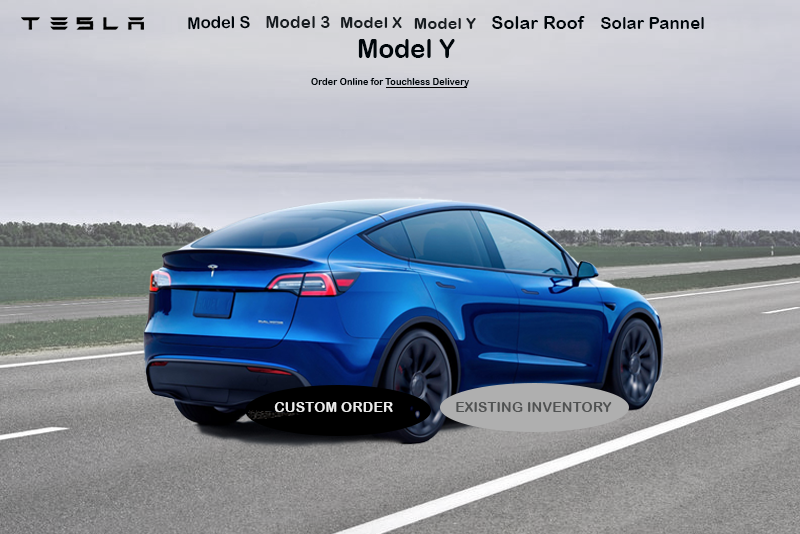
<style>
.page{position:relative;width:800px;height:534px}
.page>*{position:absolute;margin:0}
.t1{font:16.5px "ArialRoundedMTBold";color:#00060b}
.t2{font:17.3px "ArialRoundedMTBold";color:#181d21}
.t3{font:16.5px "ArialRoundedMTBold";color:#181d21}
.t4{font:18.3px "ArialRoundedMTBold";color:#00060b}
.t5{font:17.1px "ArialRoundedMTBold";color:#00060b}
.t6{font:25.9px "ArialRoundedMTBold";color:#00060b}
.t7{font:9.2px "ArialRoundedMTBold";color:#00060b}
.t8{font:14.4px "ArialRoundedMTBold";color:#ebebeb}
.t9{font:14.4px "ArialRoundedMTBold";color:#505252}
</style>
<div class="page">
<p class="t1" style="left:188px;top:16px;width:62px;height:14px;rotate:-1deg">Model S</p>
<p class="t2" style="left:266px;top:16px;width:64px;height:12px">Model 3</p>
<p class="t3" style="left:341px;top:17px;width:61px;height:11px">Model X</p>
<p class="t4" style="left:492px;top:16px;width:93px;height:13px">Solar Roof</p>
<p class="t5" style="left:601px;top:17px;width:103px;height:12px">Solar Pannel</p>
<p class="t3" style="left:414px;top:18px;width:62px;height:11px">Model Y</p>
<p class="t6" style="left:358px;top:39px;width:97px;height:19px">Model Y</p>
<p class="t7" style="left:311px;top:78px;width:73px;height:7px">Order Online for</p>
<p class="t7" style="left:385px;top:78px;width:84px;height:9px">Touchless Delivery</p>
<p class="t8" style="left:274px;top:402px;width:119px;height:10px">CUSTOM ORDER</p>
<p class="t9" style="left:456px;top:402px;width:156px;height:10px">EXISTING INVENTORY</p>
</div>
